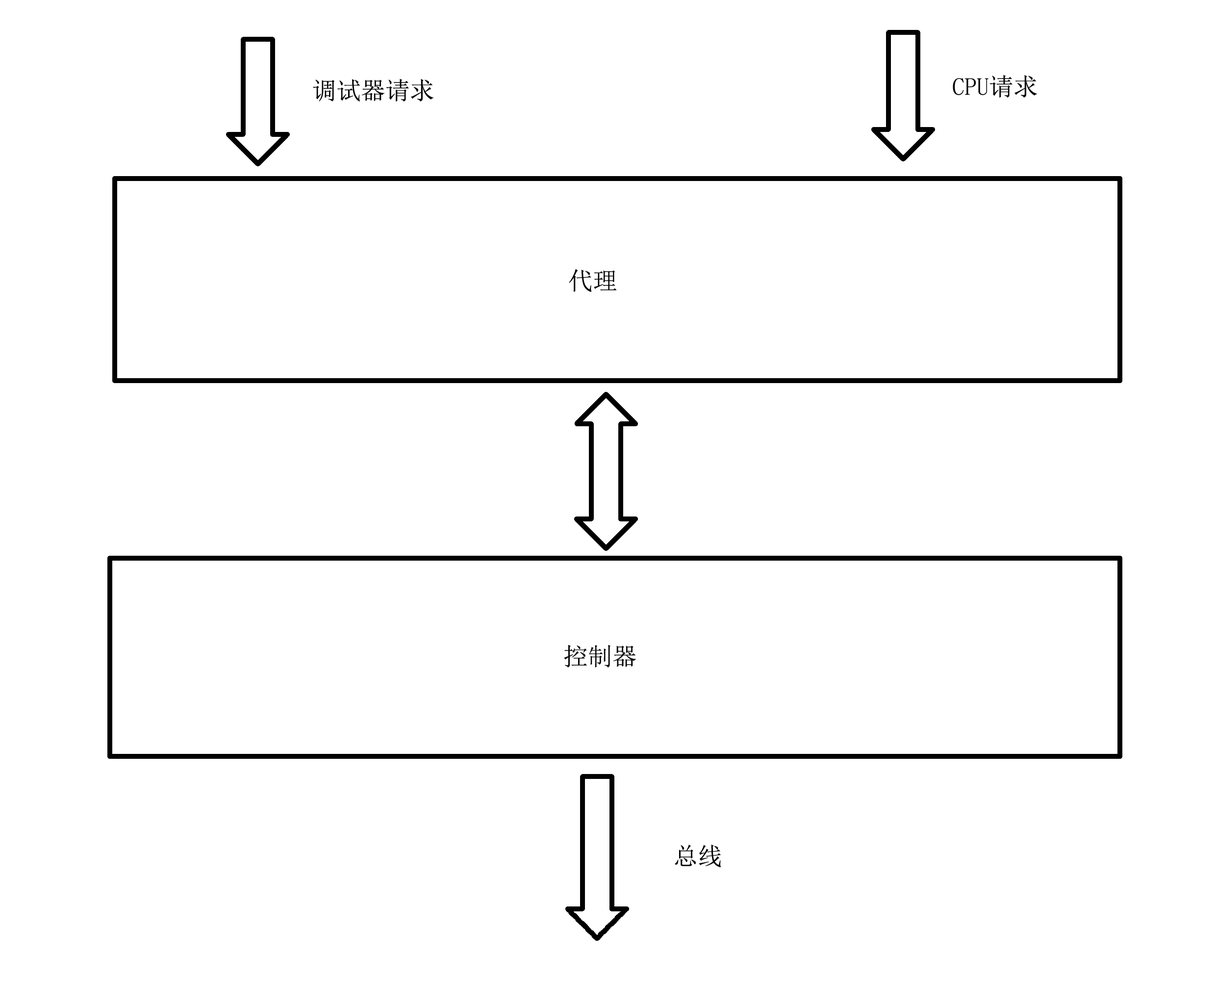
<style>
.page{position:relative;width:1216px;height:981px;background:#ffffff}
.page>*{position:absolute;margin:0}
.t1{font:24.5px "SimSun";color:#000000}
</style>
<div class="page">
<p class="t1" style="left:953px;top:75px;width:84px;height:23px">CPU请求</p>
<p class="t1" style="left:313px;top:78px;width:120px;height:23px">调试器请求</p>
<p class="t1" style="left:569px;top:269px;width:48px;height:23px">代理</p>
<p class="t1" style="left:564px;top:644px;width:72px;height:23px">控制器</p>
<p class="t1" style="left:675px;top:844px;width:46px;height:23px">总线</p>
</div>
